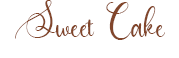
<style>
.page{position:relative;width:179px;height:58px;background:#ffffff}
.page>*{position:absolute;margin:0}
.t1{font:48px "Agatha";color:#82462b}
</style>
<div class="page">
<p class="t1" style="left:15px;top:0px;width:150px;height:40px">Sweet Cake</p>
</div>
